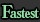
<style>
.page{position:relative;width:40px;height:22px;background:#333333}
.page>*{position:absolute;margin:0}
.t1{font:13px "RyuminPro-ExBold";letter-spacing:-0.1em;color:#90e2a5}
.t2{font:17px "RyuminPro-ExBold";letter-spacing:-0.1em;color:#90e2a5}
</style>
<div class="page">
<p class="t1" style="left:2px;top:5px;width:37px;height:14px"><span class="t2">F</span>astest</p>
</div>
